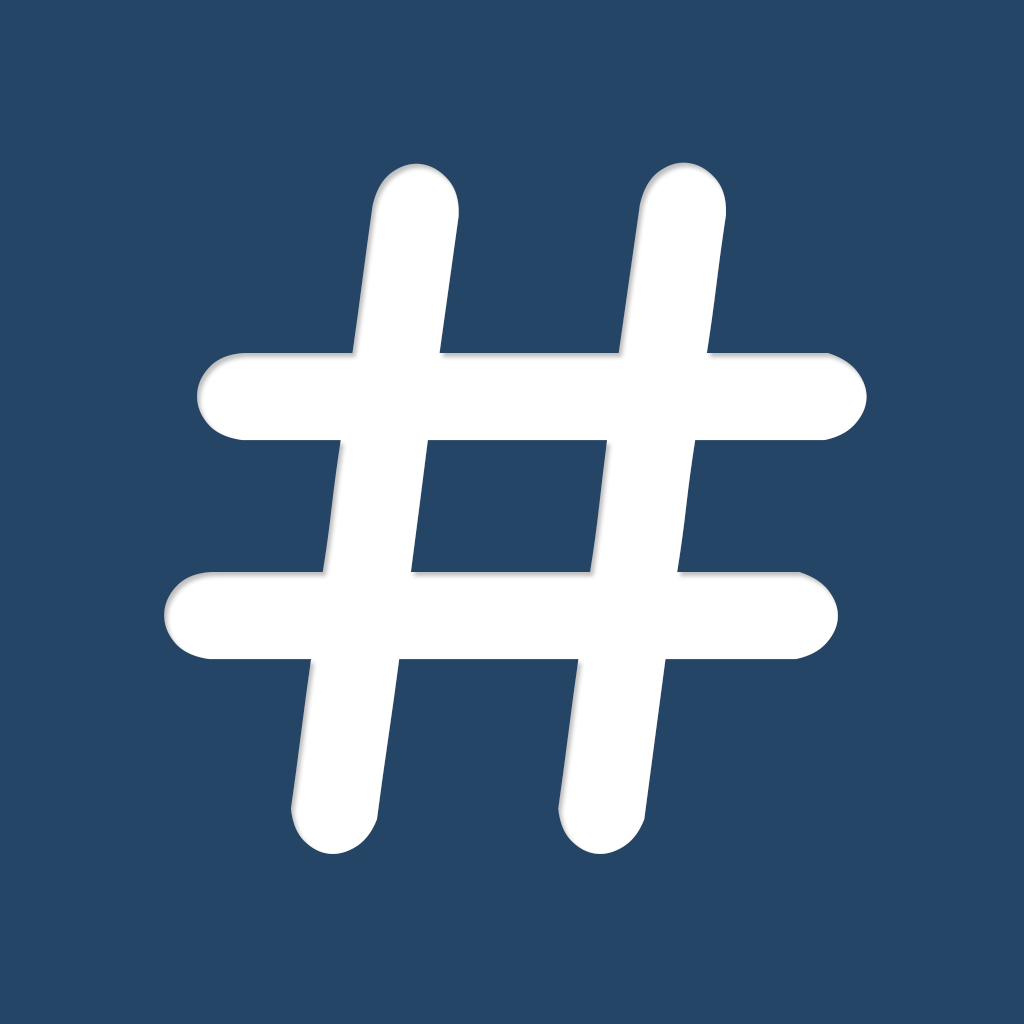
<style>
.page{position:relative;width:1024px;height:1024px;background:#254566}
.page>*{position:absolute;margin:0}
.t1{font:960px "Chalkboard";color:#ffffff}
</style>
<div class="page">
<p class="t1" style="left:164px;top:162px;width:703px;height:692px">#</p>
</div>
